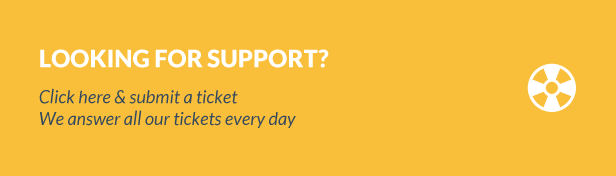
<style>
.page{position:relative;width:616px;height:176px;background:#f9bf3b}
.page>*{position:absolute;margin:0}
.t1{font:18px "Lato-Italic";color:#34495e}
.t2{font:24px/30px "Lato-Black";color:#ffffff;text-transform:uppercase}
.t3{font:18px/36px "Lato-Italic";color:#34495e}
</style>
<div class="page">
<p class="t1" style="left:39px;top:49px;width:290px;height:79px"><span class="t2">Looking for support?<br></span><span class="t3">Click here &amp; submit a ticket<br></span>We answer all our tickets every day</p>
</div>
